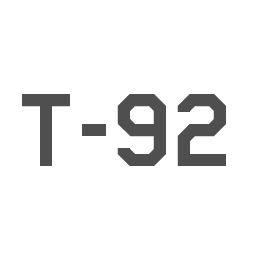
<style>
.page{position:relative;width:256px;height:256px;background:#ffffff}
.page>*{position:absolute;margin:0}
.t1{font:120px "AmarilloUSAF";color:#4f4f4f}
</style>
<div class="page">
<p class="t1" style="left:22px;top:94px;width:204px;height:72px">t-92</p>
</div>
